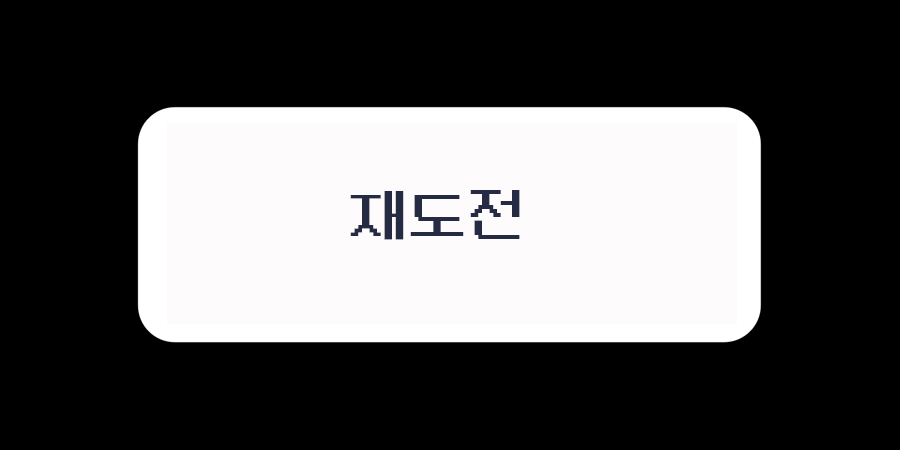
<style>
.page{position:relative;width:900px;height:450px;background:#010000}
.page>*{position:absolute;margin:0}
.t1{font:60px "DungGeunMo";color:#252b43}
</style>
<div class="page">
<p class="t1" style="left:350px;top:190px;width:170px;height:50px">재도전</p>
</div>
